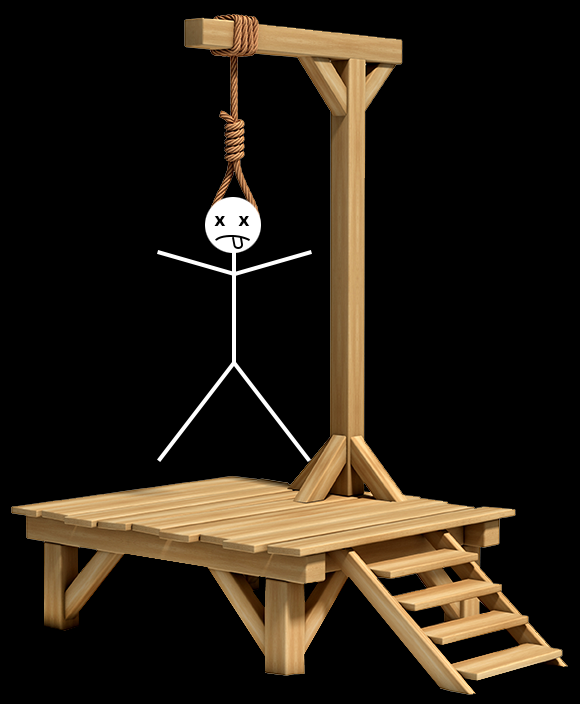
<style>
.page{position:relative;width:580px;height:704px;background:#000000}
.page>*{position:absolute;margin:0}
.t1{font:14px "Arial-Black";color:#010101}
</style>
<div class="page">
<p class="t1" style="left:214px;top:216px;width:12px;height:10px">X</p>
<p class="t1" style="left:238px;top:216px;width:12px;height:10px">X</p>
</div>
